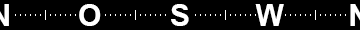
<style>
.page{position:relative;width:360px;height:30px;background:#000000}
.page>*{position:absolute;margin:0}
.t1{font:30px "Arial-BoldMT";color:#ffffff}
</style>
<div class="page">
<p class="t1" style="left:79px;top:4px;width:22px;height:22px">O</p>
<p class="t1" style="left:171px;top:4px;width:18px;height:22px">S</p>
<p class="t1" style="left:255px;top:4px;width:29px;height:22px">W</p>
</div>
